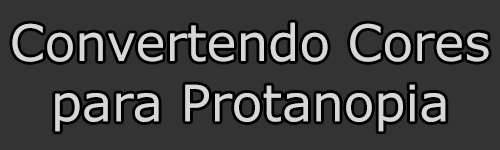
<style>
.page{position:relative;width:500px;height:150px;background:#333333}
.page>*{position:absolute;margin:0}
.t1{font:50.1px "Verdana";color:#d5d7d8}
</style>
<div class="page">
<p class="t1" style="left:12px;top:22px;width:477px;height:110px;text-align:center">Convertendo Cores<br>para Protanopia</p>
</div>
